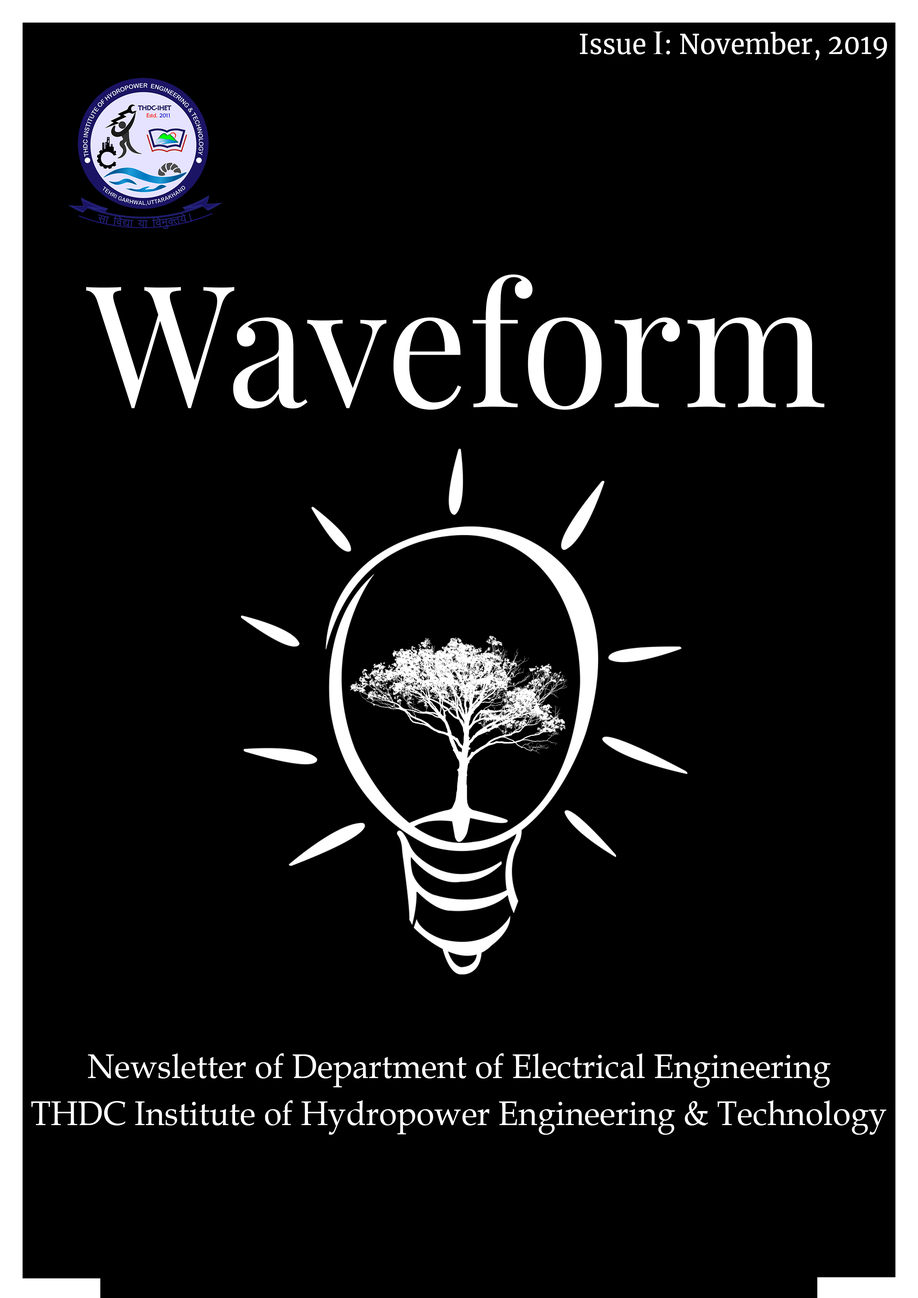
<style>
.page{position:relative;width:918px;height:1298px;background:#000000}
.page>*{position:absolute;margin:0}
.t1{font:27.2px "Merriweather-Regular";letter-spacing:0.005em;color:#ffffff;scale:0.95 1}
.t2{font:33.9px "TimesNewRomanPSMT";letter-spacing:0.005em;color:#ffffff;scale:0.95 1}
.t3{font:169.7px "PlayfairDisplay-Regular";letter-spacing:0.005em;color:#ffffff;scale:0.95 1}
.t4{font:33.9px "BookAntiqua";letter-spacing:0.005em;color:#ffffff;scale:0.95 1}
</style>
<div class="page">
<p class="t1" style="left:580px;top:31px;width:308px;height:29px">Issue <span class="t2">I</span>: November, 2019</p>
<p class="t3" style="left:86px;top:274px;width:739px;height:136px">Waveform</p>
<p class="t4" style="left:88px;top:1054px;width:743px;height:34px">Newsletter of Department of Electrical Engineering</p>
<p class="t4" style="left:31px;top:1101px;width:856px;height:34px">THDC Institute of Hydropower Engineering &amp; Technology</p>
</div>
